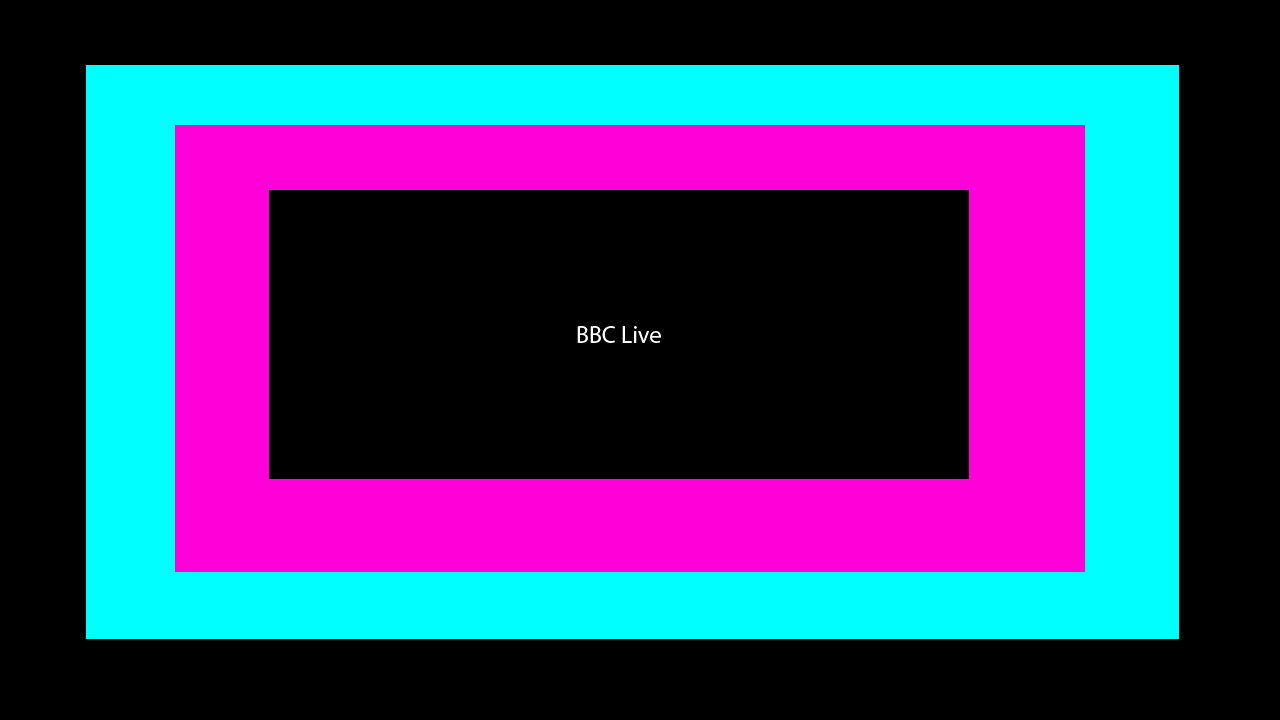
<style>
.page{position:relative;width:1280px;height:720px;background:#000000}
.page>*{position:absolute;margin:0}
.t1{font:24px "MyriadPro-Regular";color:#ffffff}
</style>
<div class="page">
<p class="t1" style="left:577px;top:326px;width:84px;height:17px">BBC Live</p>
</div>
